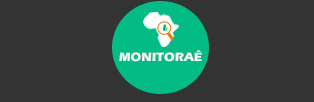
<style>
.page{position:relative;width:314px;height:102px;background:#333333}
.page>*{position:absolute;margin:0}
.t1{font:12.5px "ErasITC-Bold";letter-spacing:0.005em;color:#f8f8f8}
</style>
<div class="page">
<p class="t1" style="left:119px;top:50px;width:83px;height:12px">MONITORAÊ</p>
</div>
